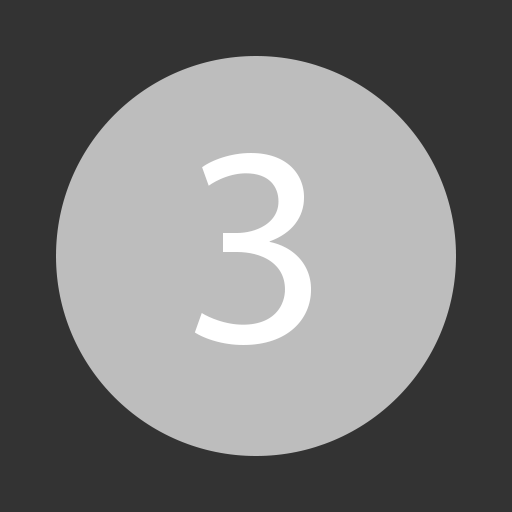
<style>
.page{position:relative;width:512px;height:512px;background:#333333}
.page>*{position:absolute;margin:0}
.t1{font:286px "MyriadPro-Regular";color:#ffffff}
</style>
<div class="page">
<p class="t1" style="left:194px;top:153px;width:117px;height:192px">3</p>
</div>
